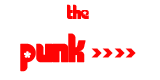
<style>
.page{position:relative;width:160px;height:80px;background:#ffffff}
.page>*{position:absolute;margin:0}
.t1{font:36px "Chick";color:#ff0404}
.t2{font:18px "Chick";color:#ff0404}
</style>
<div class="page">
<p class="t1" style="left:20px;top:4px;width:116px;height:68px;text-align:center"><span class="t2">the<br></span>punk &gt;&gt;&gt;&gt;</p>
</div>
